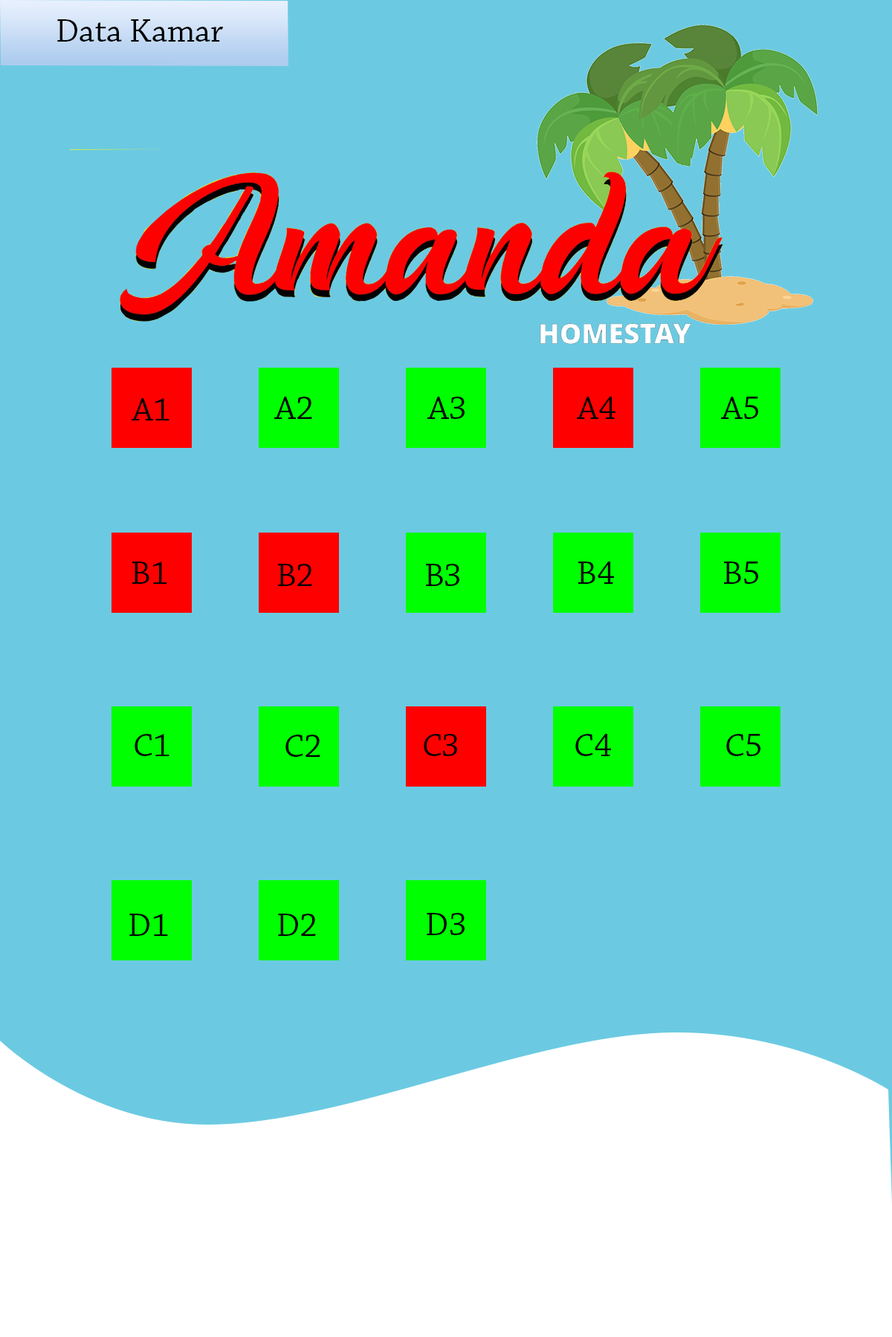
<style>
.page{position:relative;width:892px;height:1337px;background:#6bcae2}
.page>*{position:absolute;margin:0}
.t1{font:34.1px "ChaparralPro-Regular";color:#000101}
</style>
<div class="page">
<p class="t1" style="left:57px;top:19px;width:166px;height:23px">Data Kamar</p>
<p class="t1" style="left:132px;top:398px;width:37px;height:23px">A1</p>
<p class="t1" style="left:274px;top:397px;width:38px;height:22px">A2</p>
<p class="t1" style="left:427px;top:397px;width:37px;height:22px">A3</p>
<p class="t1" style="left:577px;top:397px;width:38px;height:22px">A4</p>
<p class="t1" style="left:721px;top:397px;width:37px;height:22px">A5</p>
<p class="t1" style="left:132px;top:562px;width:35px;height:22px">B1</p>
<p class="t1" style="left:278px;top:564px;width:34px;height:22px">B2</p>
<p class="t1" style="left:426px;top:564px;width:33px;height:22px">B3</p>
<p class="t1" style="left:578px;top:562px;width:36px;height:22px">B4</p>
<p class="t1" style="left:724px;top:562px;width:34px;height:22px">B5</p>
<p class="t1" style="left:134px;top:734px;width:35px;height:22px">C1</p>
<p class="t1" style="left:285px;top:735px;width:35px;height:22px">C2</p>
<p class="t1" style="left:424px;top:734px;width:33px;height:22px">C3</p>
<p class="t1" style="left:575px;top:734px;width:36px;height:22px">C4</p>
<p class="t1" style="left:726px;top:734px;width:34px;height:22px">C5</p>
<p class="t1" style="left:129px;top:914px;width:39px;height:22px">D1</p>
<p class="t1" style="left:278px;top:914px;width:38px;height:22px">D2</p>
<p class="t1" style="left:426px;top:913px;width:38px;height:22px">D3</p>
</div>
